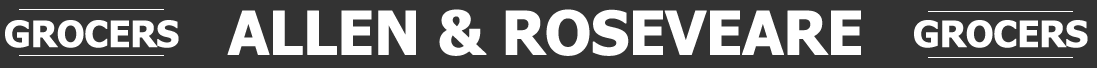
<style>
.page{position:relative;width:1097px;height:68px;background:#333333}
.page>*{position:absolute;margin:0}
.t1{font:60px "Tahoma-Bold";letter-spacing:-0.03em;color:#ffffff;font-weight:bold}
.t2{font:36px "Tahoma-Bold";letter-spacing:-0.03em;color:#ffffff;font-weight:bold}
</style>
<div class="page">
<p class="t1" style="left:227px;top:9px;width:634px;height:47px">ALLEN &amp; ROSEVEARE</p>
<p class="t2" style="left:5px;top:20px;width:174px;height:28px">GROCERS</p>
<p class="t2" style="left:914px;top:20px;width:174px;height:28px">GROCERS</p>
</div>
